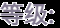
<style>
.page{position:relative;width:60px;height:28px;background:#000000}
.page>*{position:absolute;margin:0}
.t1{font:24px "WebPSD-18463539-0-Regular";color:#837a91;font-weight:bold}
</style>
<div class="page">
<p class="t1" style="left:0px;top:0px;width:60px;height:28px">等级:</p>
</div>
